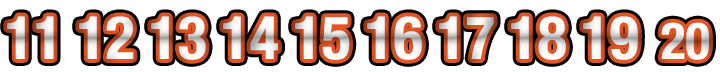
<style>
.page{position:relative;width:720px;height:72px;background:#ffffff}
.page>*{position:absolute;margin:0}
.t1{font:60px "HelveticaNeue-CondensedBold";color:#f5f5f5}
.t2{font:51px "HelveticaNeue-CondensedBold";color:#f5f5f5}
</style>
<div class="page">
<p class="t1" style="left:7px;top:16px;width:702px;height:44px">11 12 13 14 15 16 17 18 19  <span class="t2">20</span></p>
</div>
